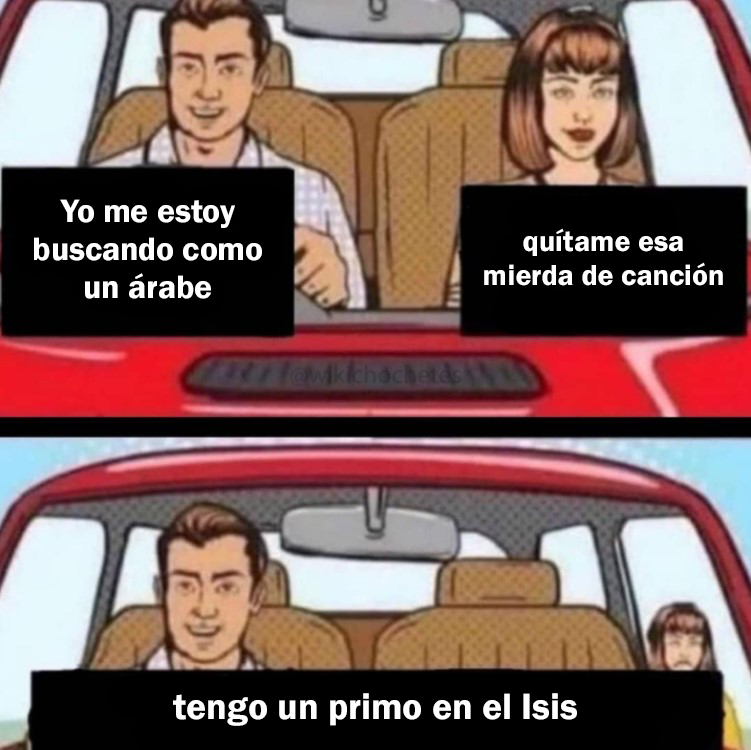
<style>
.page{position:relative;width:751px;height:750px}
.page>*{position:absolute;margin:0}
.t1{font:33.4px "FranklinGothic-Demi";color:#ffffff}
.t2{font:29.9px "FranklinGothic-Demi";color:#ffffff}
.t3{font:37.6px "FranklinGothic-Demi";color:#ffffff}
</style>
<div class="page">
<p class="t1" style="left:34px;top:199px;width:228px;height:100px;text-align:center">Yo me estoy<br>buscando como<br>un árabe</p>
<p class="t2" style="left:484px;top:228px;width:239px;height:58px;text-align:center">quítame esa<br>mierda de canción</p>
<p class="t3" style="left:173px;top:693px;width:404px;height:33px">tengo un primo en el Isis</p>
</div>
